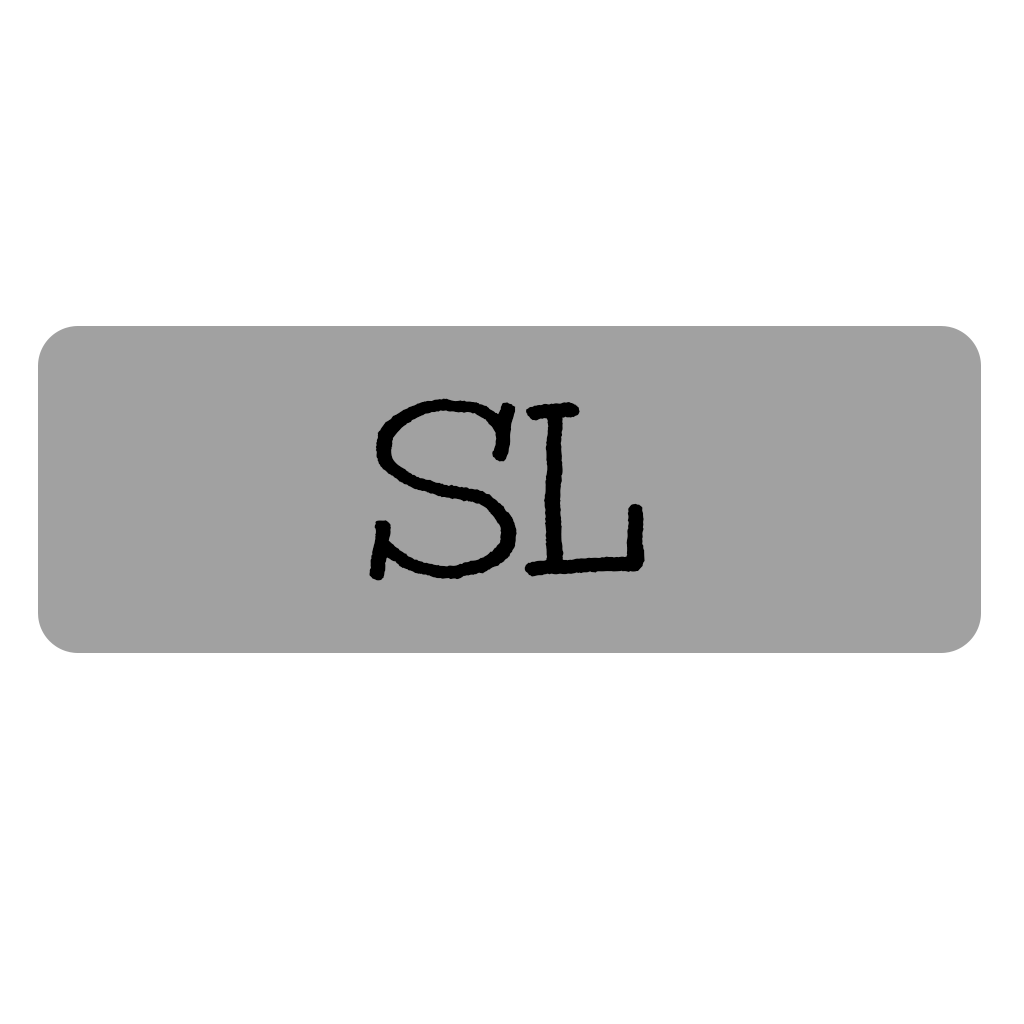
<style>
.page{position:relative;width:1024px;height:1024px;background:#ffffff}
.page>*{position:absolute;margin:0}
.t1{font:250px "Unkempt";color:#000000}
</style>
<div class="page">
<p class="t1" style="left:369px;top:398px;width:276px;height:183px">SL</p>
</div>
